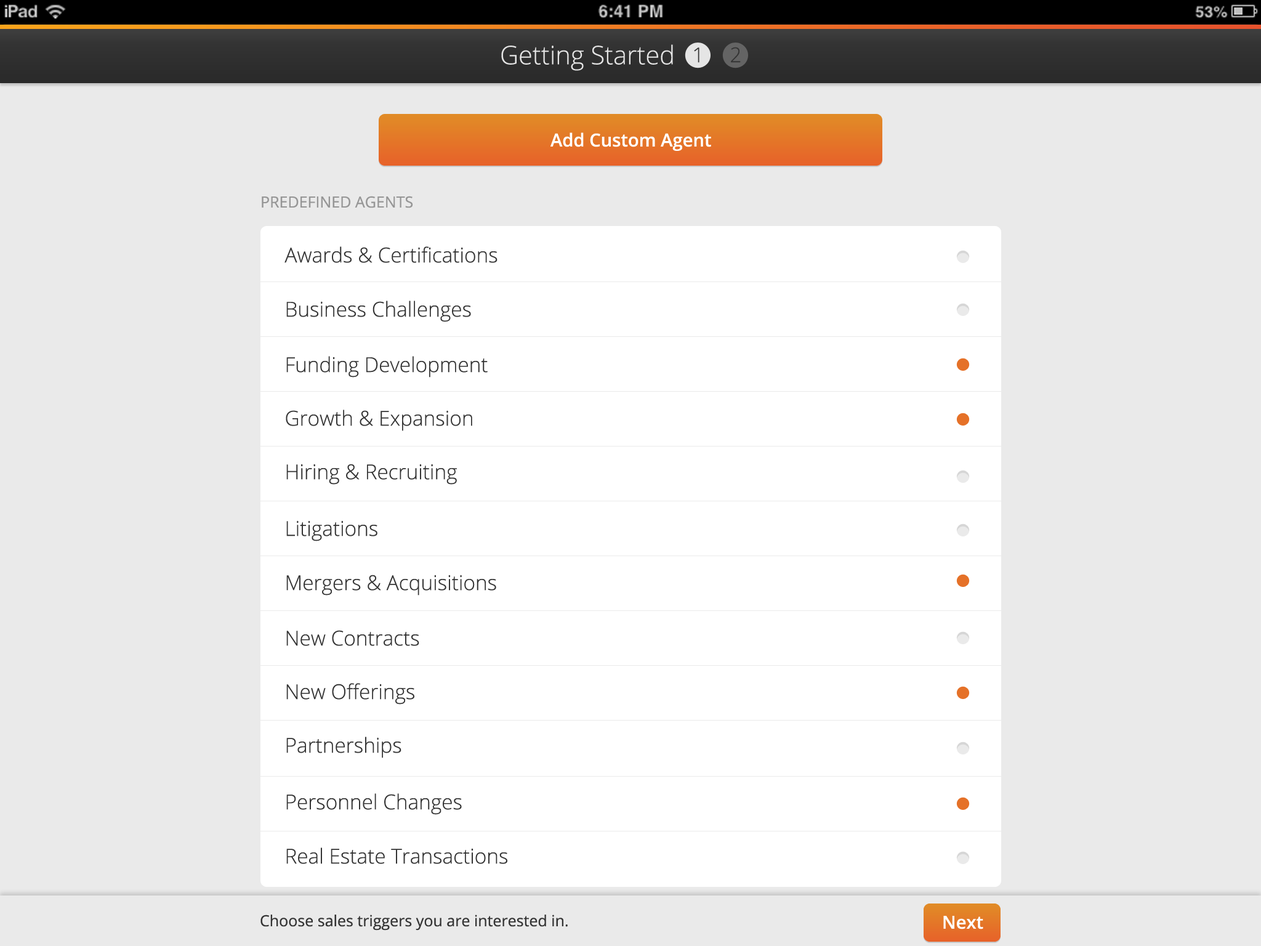
<style>
.page{position:relative;width:1261px;height:946px;background:#eaeaea}
.page>*{position:absolute;margin:0}
.t1{font:25.7px "OpenSans-Light";color:#e5e5e5}
.t2{font:20.5px "OpenSans-Light";color:#343434}
.t3{font:18px "OpenSans-Semibold";color:#ffffff}
.t4{font:15.4px "OpenSans";color:#969696}
.t5{font:15.4px "OpenSans";color:#343434}
</style>
<div class="page">
<p class="t1" style="left:501px;top:44px;width:172px;height:27px">Getting Started</p>
<p class="t2" style="left:694px;top:47px;width:5px;height:16px">1</p>
<p class="t2" style="left:731px;top:47px;width:10px;height:16px">2</p>
<p class="t3" style="left:550px;top:132px;width:161px;height:19px">Add Custom Agent</p>
<p class="t4" style="left:262px;top:196px;width:151px;height:12px">PREDEFINED AGENTS</p>
<p class="t2" style="left:284px;top:246px;width:213px;height:17px">Awards &amp; Certifications</p>
<p class="t2" style="left:286px;top:300px;width:185px;height:22px">Business Challenges</p>
<p class="t2" style="left:286px;top:356px;width:202px;height:21px">Funding Development</p>
<p class="t2" style="left:286px;top:409px;width:186px;height:22px">Growth &amp; Expansion</p>
<p class="t2" style="left:286px;top:464px;width:171px;height:21px">Hiring &amp; Recruiting</p>
<p class="t2" style="left:286px;top:520px;width:91px;height:21px">Litigations</p>
<p class="t2" style="left:286px;top:574px;width:210px;height:21px">Mergers &amp; Acquisitions</p>
<p class="t2" style="left:286px;top:630px;width:133px;height:16px">New Contracts</p>
<p class="t2" style="left:286px;top:683px;width:128px;height:21px">New Offerings</p>
<p class="t2" style="left:286px;top:736px;width:115px;height:22px">Partnerships</p>
<p class="t2" style="left:286px;top:793px;width:176px;height:22px">Personnel Changes</p>
<p class="t2" style="left:286px;top:847px;width:221px;height:17px">Real Estate Transactions</p>
<p class="t5" style="left:260px;top:914px;width:308px;height:16px">Choose sales triggers you are interested in.</p>
<p class="t3" style="left:943px;top:916px;width:40px;height:13px">Next</p>
</div>
